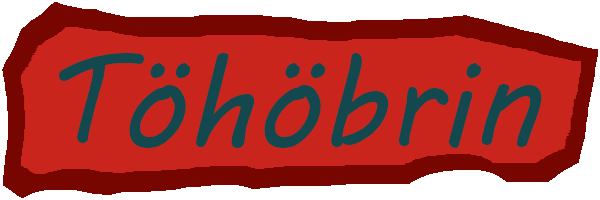
<style>
.page{position:relative;width:600px;height:200px;background:#c9251d}
.page>*{position:absolute;margin:0}
.t1{font:125px "MVBoli";color:#12484e}
</style>
<div class="page">
<p class="t1" style="left:59px;top:53px;width:483px;height:95px">Töhöbrin</p>
</div>
